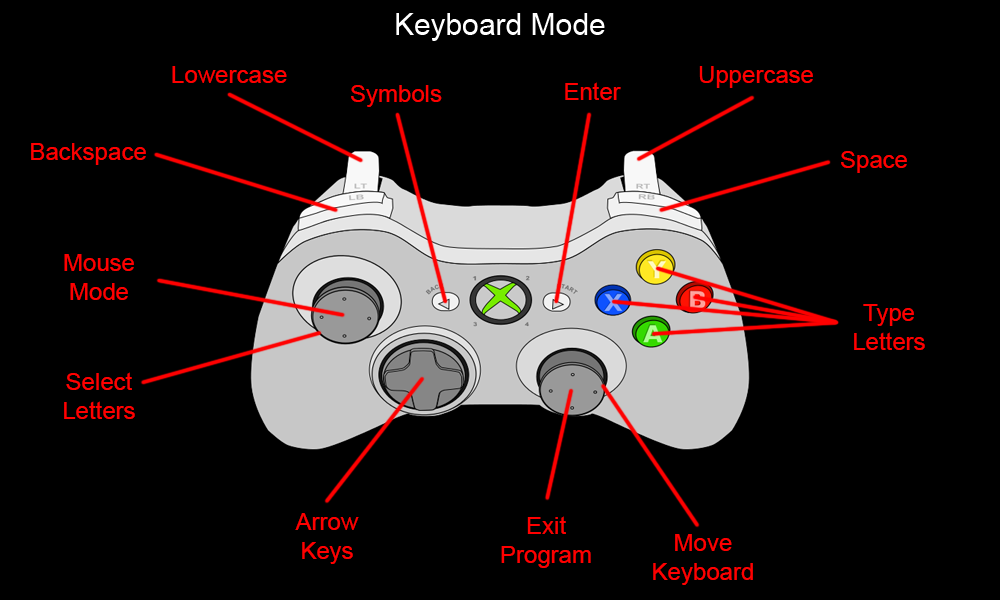
<style>
.page{position:relative;width:1000px;height:600px;background:#000000}
.page>*{position:absolute;margin:0}
.t1{font:24px "ArialMT";color:#ff0000}
.t2{font:23.8px "ArialMT";color:#ff0000}
</style>
<div class="page">
<p class="t1" style="left:172px;top:66px;width:115px;height:17px">Lowercase</p>
<p class="t1" style="left:699px;top:66px;width:114px;height:22px">Uppercase</p>
<p class="t1" style="left:351px;top:85px;width:91px;height:22px">Symbols</p>
<p class="t1" style="left:565px;top:82px;width:56px;height:18px">Enter</p>
<p class="t1" style="left:31px;top:143px;width:115px;height:22px">Backspace</p>
<p class="t1" style="left:841px;top:151px;width:66px;height:22px">Space</p>
<p class="t1" style="left:64px;top:254px;width:70px;height:46px;text-align:center">Mouse<br>Mode</p>
<p class="t1" style="left:854px;top:304px;width:71px;height:46px;text-align:center">Type<br>Letters</p>
<p class="t2" style="left:64px;top:372px;width:71px;height:47px;text-align:center">Select<br>Letters</p>
<p class="t1" style="left:295px;top:513px;width:64px;height:51px;text-align:center">Arrow<br>Keys</p>
<p class="t1" style="left:501px;top:516px;width:90px;height:52px;text-align:center">Exit<br>Program</p>
<p class="t1" style="left:653px;top:534px;width:100px;height:51px;text-align:center">Move<br>Keyboard</p>
</div>
